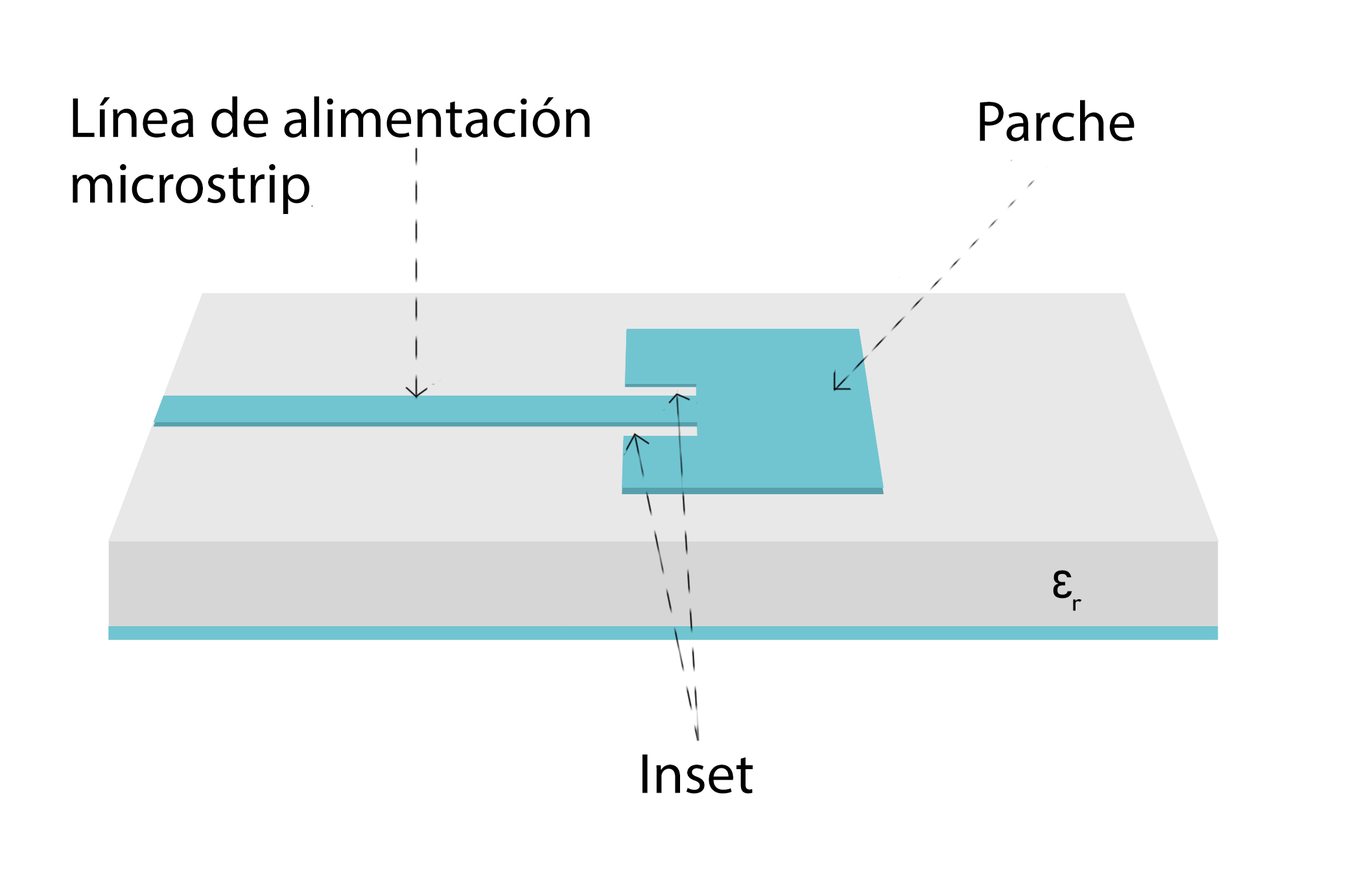
<style>
.page{position:relative;width:1353px;height:882px;background:#ffffff}
.page>*{position:absolute;margin:0}
.t1{font:98.2px/65.6px "MyriadPro-Regular";color:#000000}
.t2{font:98.1px "MyriadPro-Regular";color:#000000}
.t3{font:38.6px "Bahnschrift";letter-spacing:-0.06em;color:#000000;font-weight:bold;font-style:italic;scale:1.1 1}
</style>
<div class="page">
<p class="t1" style="left:73px;top:96px;width:517px;height:118px">Línea de alimentación<br>microstrip</p>
<p class="t2" style="left:979px;top:100px;width:155px;height:41px">Parche</p>
<p class="t3" style="left:1053px;top:570px;width:29px;height:41px">Ɛr</p>
<p class="t2" style="left:642px;top:754px;width:111px;height:39px">Inset</p>
</div>
